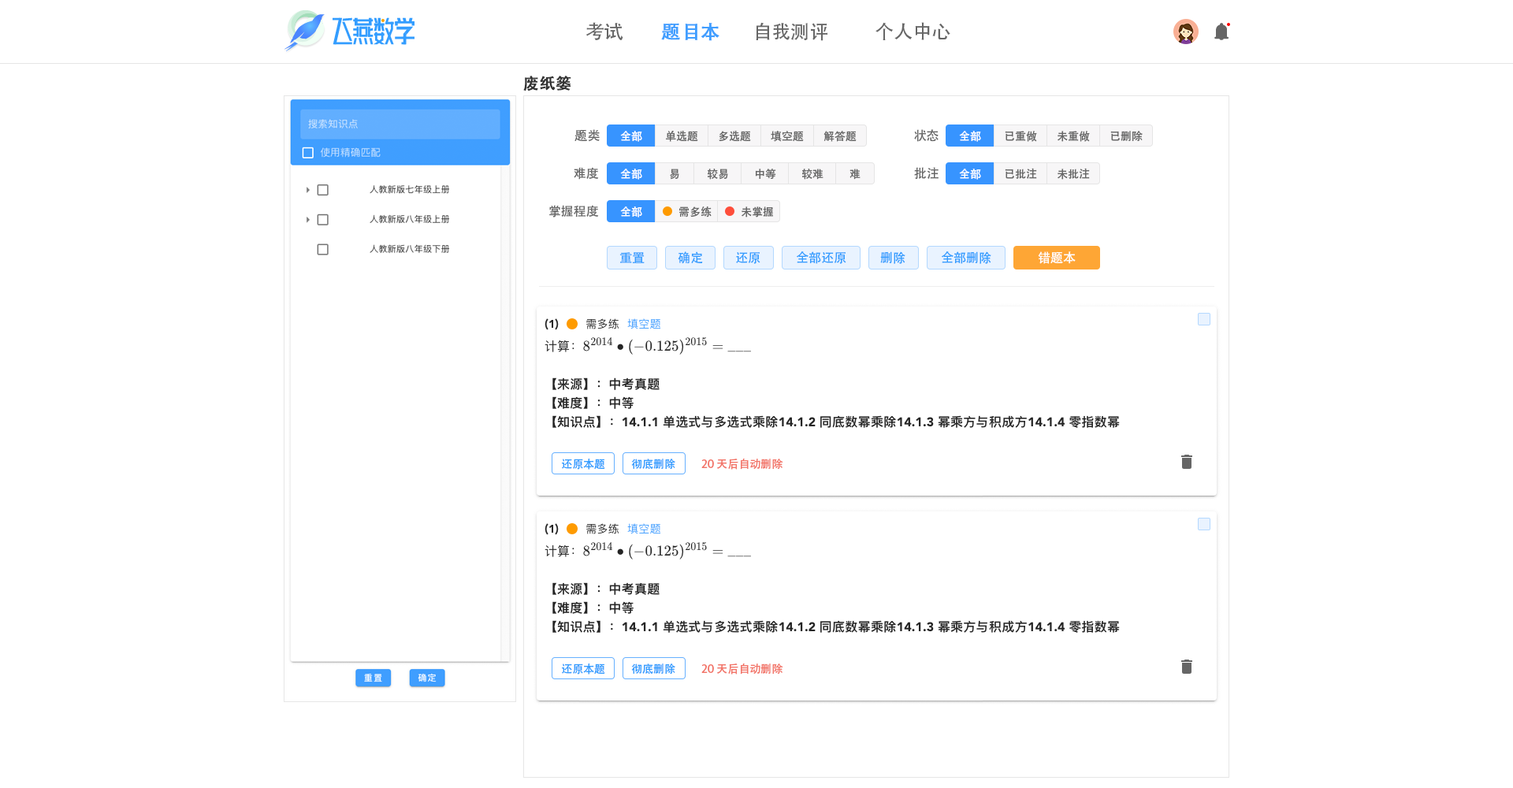
<style>
.page{position:relative;width:1513px;height:788px;background:#ffffff}
.page>*{position:absolute;margin:0}
.t1{font:18.9px "AdobeHeitiStd-Regular";color:#666666}
.t2{font:18.9px "AdobeHeitiStd-Regular";color:#409eff;font-weight:bold}
.t3{font:15.8px "AdobeHeitiStd-Regular";color:#333333;font-weight:bold}
.t4{font:12.6px "AdobeHeitiStd-Regular";color:#666666}
.t5{font:11px "AdobeHeitiStd-Regular";color:#ffffff}
.t6{font:11px "AdobeHeitiStd-Regular";color:#666666}
.t7{font:12.6px "AdobeHeitiStd-Regular";color:#339dff}
.t8{font:12.6px "AdobeHeitiStd-Regular";color:#ffffff}
.t9{font:11px "AdobeHeitiStd-Regular";color:#339dff}
.t10{font:11px "AdobeHeitiStd-Regular";color:#f27468}
</style>
<div class="page">
<p class="t1" style="left:586px;top:22px;width:37px;height:18px">考试</p>
<p class="t2" style="left:661px;top:23px;width:59px;height:18px">题目本</p>
<p class="t1" style="left:756px;top:22px;width:71px;height:19px">自我测评</p>
<p class="t1" style="left:876px;top:22px;width:74px;height:18px">个人中心</p>
<p class="t3" style="left:523px;top:76px;width:48px;height:15px">废纸篓</p>
<p class="t4" style="left:575px;top:129px;width:25px;height:13px">题类</p>
<p class="t5" style="left:620px;top:131px;width:22px;height:11px">全部</p>
<p class="t6" style="left:666px;top:130px;width:32px;height:12px">单选题</p>
<p class="t6" style="left:719px;top:130px;width:32px;height:12px">多选题</p>
<p class="t6" style="left:771px;top:131px;width:33px;height:11px">填空题</p>
<p class="t6" style="left:824px;top:131px;width:33px;height:11px">解答题</p>
<p class="t4" style="left:914px;top:129px;width:25px;height:13px">状态</p>
<p class="t5" style="left:959px;top:131px;width:22px;height:11px">全部</p>
<p class="t6" style="left:1005px;top:131px;width:32px;height:11px">已重做</p>
<p class="t6" style="left:1058px;top:131px;width:32px;height:11px">未重做</p>
<p class="t6" style="left:1110px;top:131px;width:33px;height:10px">已删除</p>
<p class="t4" style="left:574px;top:167px;width:25px;height:13px">难度</p>
<p class="t5" style="left:620px;top:169px;width:22px;height:11px">全部</p>
<p class="t6" style="left:670px;top:169px;width:9px;height:11px">易</p>
<p class="t6" style="left:708px;top:169px;width:20px;height:11px">较易</p>
<p class="t6" style="left:755px;top:169px;width:21px;height:10px">中等</p>
<p class="t6" style="left:802px;top:169px;width:22px;height:11px">较难</p>
<p class="t6" style="left:850px;top:169px;width:11px;height:11px">难</p>
<p class="t4" style="left:914px;top:167px;width:25px;height:13px">批注</p>
<p class="t5" style="left:959px;top:169px;width:22px;height:11px">全部</p>
<p class="t6" style="left:1005px;top:168px;width:32px;height:11px">已批注</p>
<p class="t6" style="left:1058px;top:168px;width:32px;height:12px">未批注</p>
<p class="t4" style="left:549px;top:205px;width:50px;height:13px">掌握程度</p>
<p class="t5" style="left:620px;top:206px;width:22px;height:12px">全部</p>
<p class="t6" style="left:679px;top:206px;width:33px;height:12px">需多练</p>
<p class="t6" style="left:742px;top:206px;width:31px;height:12px">未掌握</p>
<p class="t7" style="left:619px;top:252px;width:26px;height:11px">重置</p>
<p class="t7" style="left:678px;top:251px;width:25px;height:13px">确定</p>
<p class="t7" style="left:736px;top:252px;width:24px;height:12px">还原</p>
<p class="t7" style="left:796px;top:251px;width:50px;height:13px">全部还原</p>
<p class="t7" style="left:880px;top:251px;width:25px;height:13px">删除</p>
<p class="t7" style="left:941px;top:251px;width:50px;height:13px">全部删除</p>
<p class="t8" style="left:1038px;top:251px;width:38px;height:13px">错题本</p>
<p class="t9" style="left:562px;top:459px;width:43px;height:11px">还原本题</p>
<p class="t9" style="left:631px;top:459px;width:44px;height:11px">彻底删除</p>
<p class="t10" style="left:701px;top:459px;width:82px;height:11px">20天后自动删除</p>
<p class="t9" style="left:562px;top:664px;width:43px;height:11px">还原本题</p>
<p class="t9" style="left:631px;top:664px;width:44px;height:11px">彻底删除</p>
<p class="t10" style="left:701px;top:664px;width:82px;height:11px">20天后自动删除</p>
</div>
